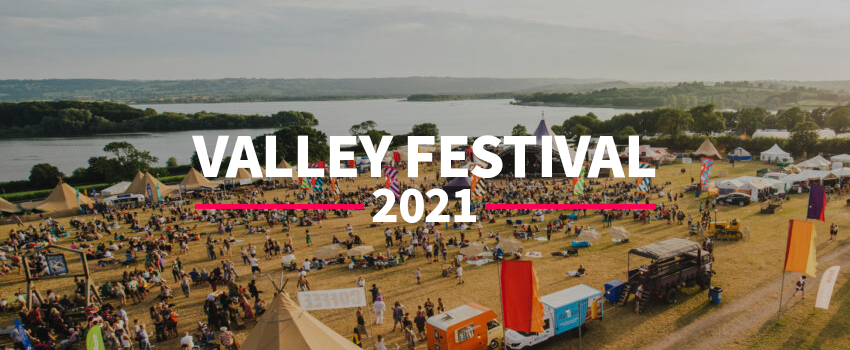
<style>
.page{position:relative;width:850px;height:350px}
.page>*{position:absolute;margin:0}
.t1{font:55px/45px "NotoSansKR-Black";letter-spacing:-0.02em;color:#ffffff}
.t2{font:45px/45px "NotoSansKR-Black";letter-spacing:-0.02em;color:#ffffff}
</style>
<div class="page">
<p class="t1" style="left:192px;top:135px;width:464px;height:88px;text-align:center">VALLEY FESTIVAL<br><span class="t2">2021</span></p>
</div>
